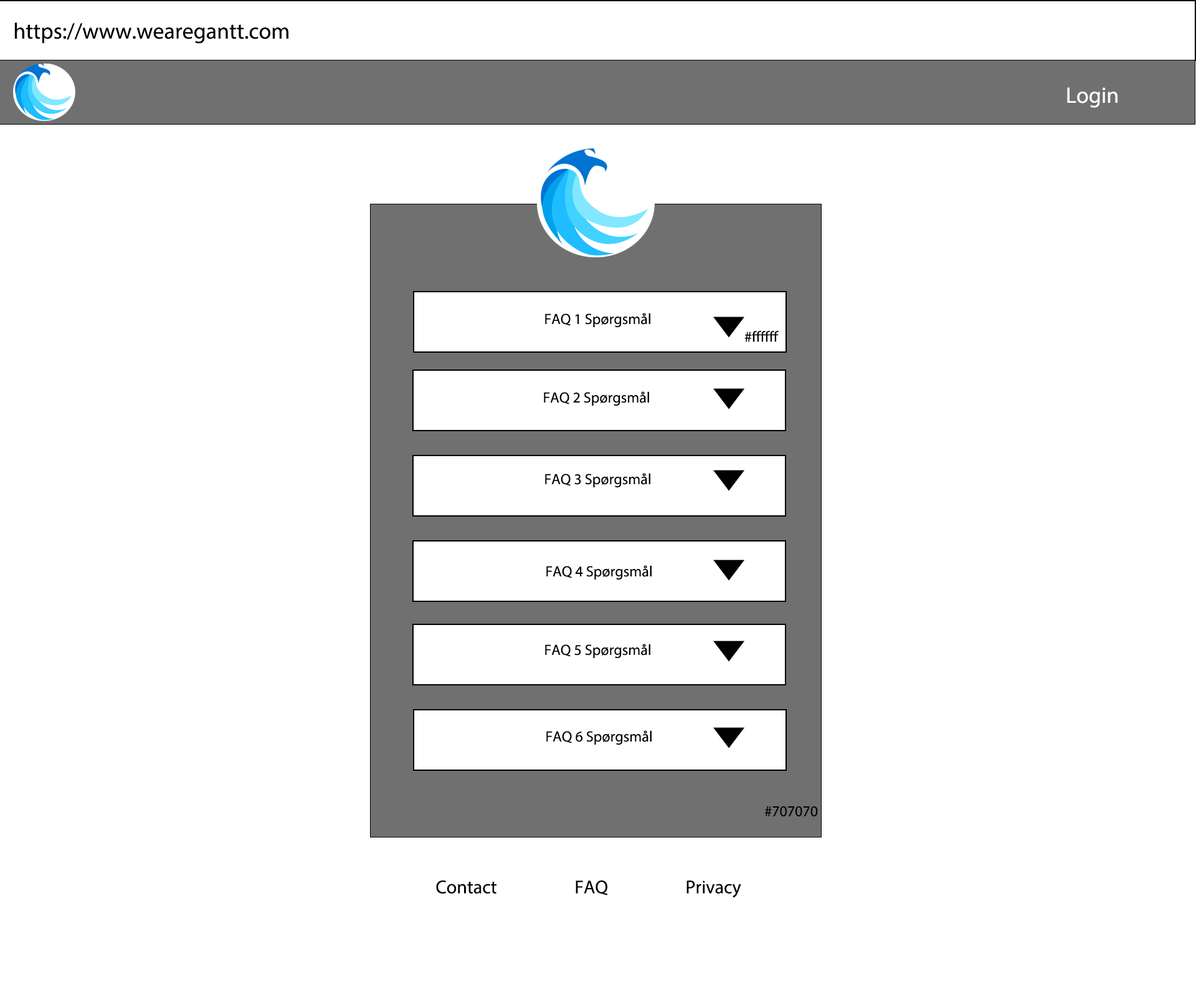
<style>
.page{position:relative;width:1196px;height:997px;background:#ffffff}
.page>*{position:absolute;margin:0}
.t1{font:22.4px "MyriadPro-Regular";color:#000000}
.t2{font:22.4px "MyriadPro-Regular";color:#ffffff}
.t3{font:15px "MyriadPro-Regular";color:#000000}
.t4{font:18.7px "MyriadPro-Regular";color:#000000}
</style>
<div class="page">
<p class="t1" style="left:14px;top:22px;width:274px;height:22px">https://www.wearegantt.com</p>
<p class="t2" style="left:1067px;top:87px;width:51px;height:21px">Login</p>
<p class="t3" style="left:545px;top:313px;width:105px;height:15px">FAQ 1 Spørgsmål</p>
<p class="t3" style="left:745px;top:330px;width:34px;height:12px">#ffffff</p>
<p class="t3" style="left:544px;top:391px;width:105px;height:15px">FAQ 2 Spørgsmål</p>
<p class="t3" style="left:545px;top:473px;width:105px;height:15px">FAQ 3 Spørgsmål</p>
<p class="t3" style="left:546px;top:565px;width:106px;height:15px">FAQ 4 Spørgsmål</p>
<p class="t3" style="left:545px;top:644px;width:105px;height:15px">FAQ 5 Spørgsmål</p>
<p class="t3" style="left:546px;top:730px;width:106px;height:15px">FAQ 6 Spørgsmål</p>
<p class="t3" style="left:765px;top:806px;width:53px;height:11px">#707070</p>
<p class="t4" style="left:436px;top:880px;width:61px;height:13px">Contact</p>
<p class="t4" style="left:576px;top:880px;width:32px;height:15px">FAQ</p>
<p class="t4" style="left:687px;top:880px;width:54px;height:18px">Privacy</p>
</div>
